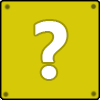
<style>
.page{position:relative;width:100px;height:100px;background:#d5c908}
.page>*{position:absolute;margin:0}
.t1{font:80px "Ebrima-Bold";color:#ffffff}
</style>
<div class="page">
<p class="t1" style="left:35px;top:21px;width:32px;height:58px">?</p>
</div>
